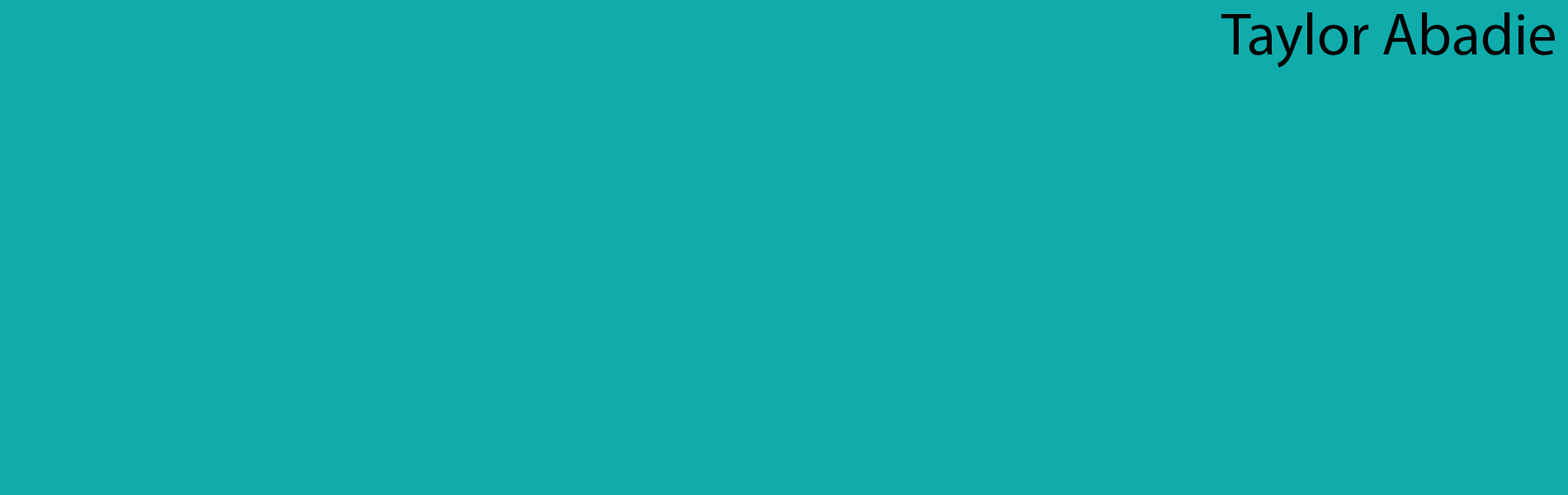
<style>
.page{position:relative;width:1568px;height:495px;background:#10acac}
.page>*{position:absolute;margin:0}
.t1{font:59.4px "MyriadPro-Regular";color:#000000}
</style>
<div class="page">
<p class="t1" style="left:1221px;top:12px;width:334px;height:56px">Taylor Abadie</p>
</div>
